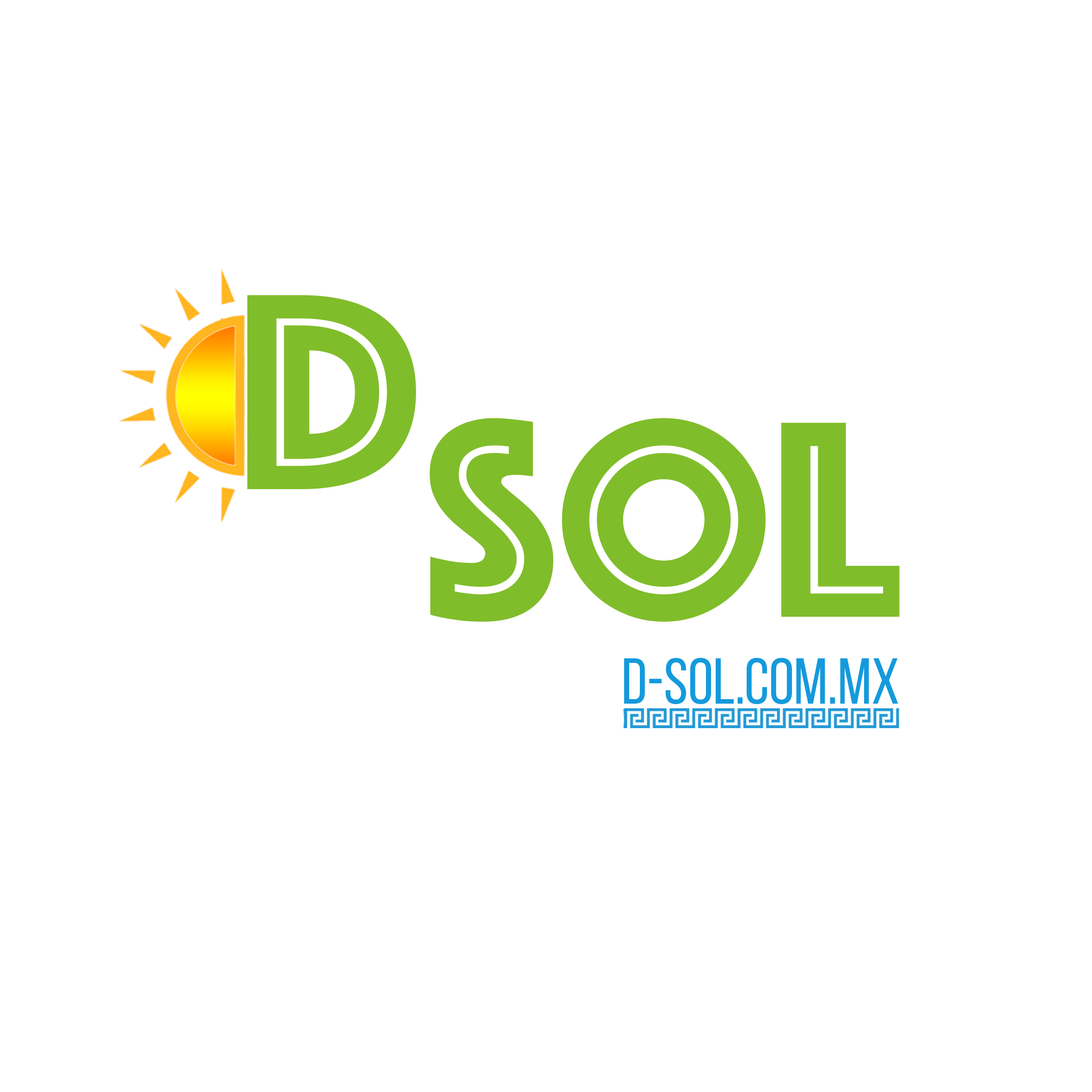
<style>
.page{position:relative;width:1092px;height:1092px;background:#ffffff}
.page>*{position:absolute;margin:0}
.t1{font:290.9px "Phosphate-Inline";color:#80bd2a}
.t2{font:64.6px "BebasNeueRegular";color:#149adc}
</style>
<div class="page">
<p class="t1" style="left:247px;top:295px;width:169px;height:194px">D</p>
<p class="t1" style="left:429px;top:418px;width:471px;height:204px">Sol</p>
<p class="t2" style="left:624px;top:658px;width:274px;height:46px">d-sol.com.mx</p>
</div>
